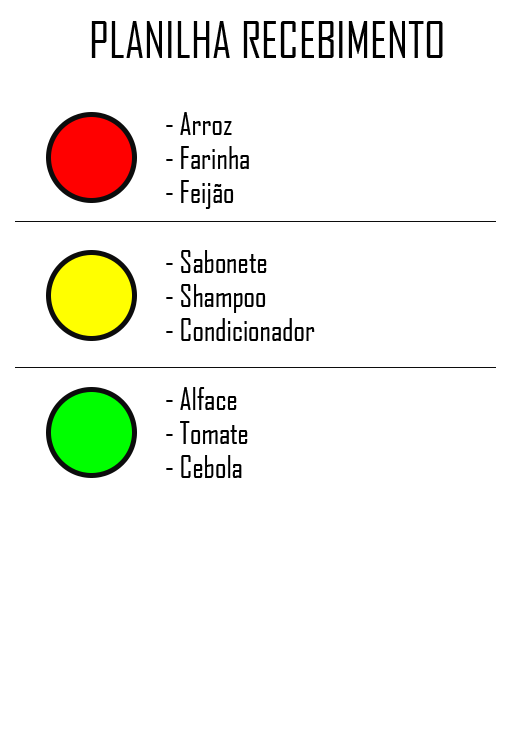
<style>
.page{position:relative;width:512px;height:732px;background:#ffffff}
.page>*{position:absolute;margin:0}
.t1{font:48px "AgencyFB-Reg";color:#000000}
.t2{font:30px "AgencyFB-Reg";color:#000000}
</style>
<div class="page">
<p class="t1" style="left:91px;top:21px;width:352px;height:37px">PLANILHA RECEBIMENTO</p>
<p class="t2" style="left:166px;top:112px;width:66px;height:23px">- Arroz</p>
<p class="t2" style="left:166px;top:146px;width:83px;height:23px">- Farinha</p>
<p class="t2" style="left:166px;top:180px;width:68px;height:29px">- Feijão</p>
<p class="t2" style="left:166px;top:250px;width:101px;height:23px">- Sabonete</p>
<p class="t2" style="left:166px;top:284px;width:100px;height:29px">- Shampoo</p>
<p class="t2" style="left:166px;top:318px;width:149px;height:23px">- Condicionador</p>
<p class="t2" style="left:166px;top:387px;width:71px;height:23px">- Alface</p>
<p class="t2" style="left:166px;top:421px;width:82px;height:23px">- Tomate</p>
<p class="t2" style="left:166px;top:455px;width:76px;height:23px">- Cebola</p>
</div>
